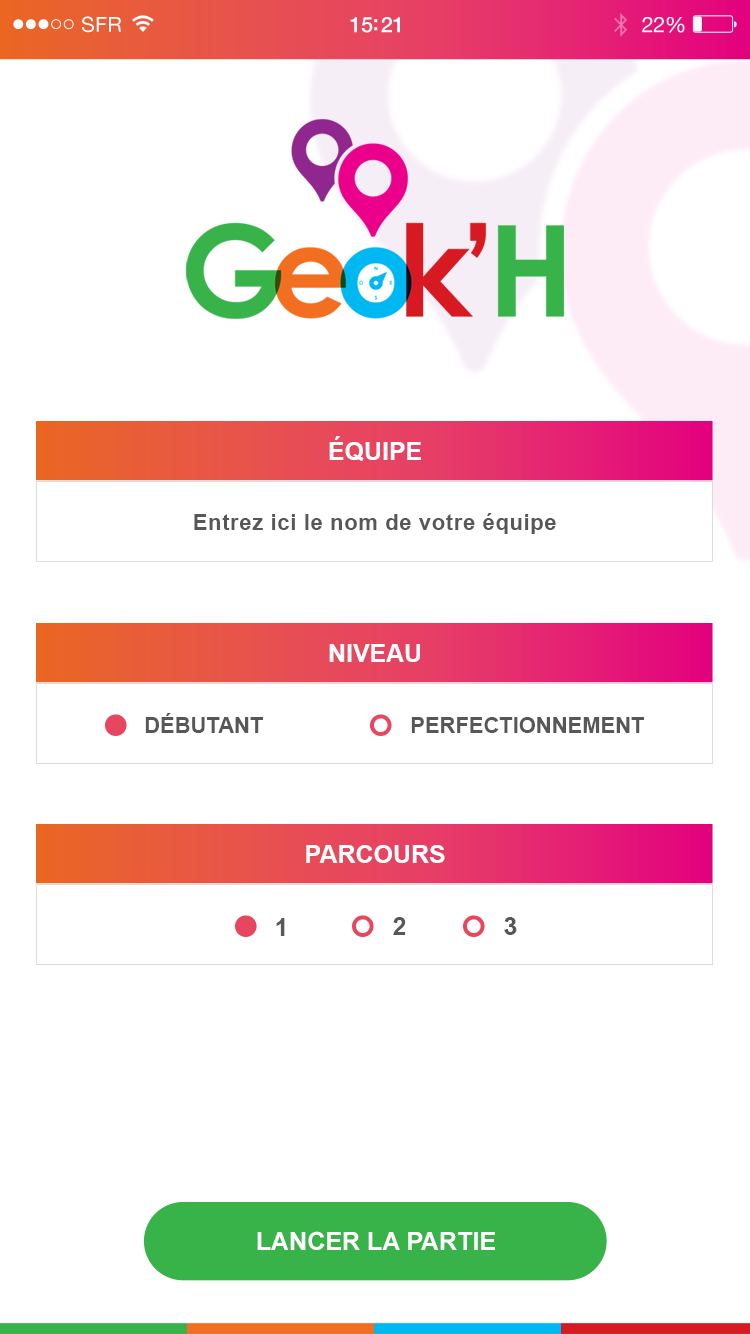
<style>
.page{position:relative;width:750px;height:1334px;background:#ffffff}
.page>*{position:absolute;margin:0}
.t1{font:25px "Arial-BoldMT";color:#fffeff}
.t2{font:22px "Arial-BoldMT";letter-spacing:0.03em;color:#575757}
.t3{font:22px "Arial-BoldMT";color:#575757}
.t4{font:25px "Arial-BoldMT";color:#575757}
.t5{font:25px "Arial-BoldMT";color:#ffffff}
</style>
<div class="page">
<p class="t1" style="left:329px;top:436px;width:92px;height:25px">ÉQUIPE</p>
<p class="t2" style="left:194px;top:513px;width:362px;height:21px">Entrez ici le nom de votre équipe</p>
<p class="t1" style="left:329px;top:644px;width:91px;height:18px">NIVEAU</p>
<p class="t3" style="left:145px;top:713px;width:118px;height:20px">DÉBUTANT</p>
<p class="t3" style="left:411px;top:717px;width:233px;height:16px">PERFECTIONNEMENT</p>
<p class="t1" style="left:306px;top:845px;width:139px;height:18px">PARCOURS</p>
<p class="t4" style="left:276px;top:918px;width:9px;height:18px">1</p>
<p class="t4" style="left:393px;top:917px;width:13px;height:18px">2</p>
<p class="t4" style="left:504px;top:917px;width:13px;height:18px">3</p>
<p class="t5" style="left:257px;top:1231px;width:238px;height:19px">LANCER LA PARTIE</p>
</div>
